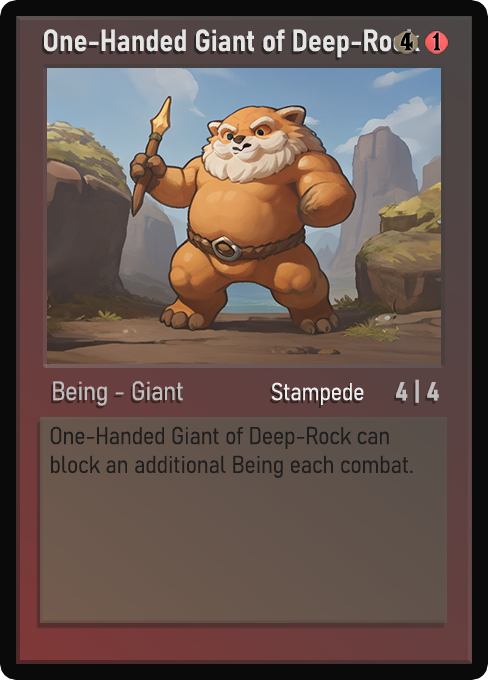
<style>
.page{position:relative;width:488px;height:680px}
.page>*{position:absolute;margin:0}
.t1{font:30px "Bahnschrift-SemiBoldSemiCondensed";color:#f2f2f2;font-weight:bold}
.t2{font:25px "WTRRoycroft";color:#000000;font-weight:bold;scale:1.09 1}
.t3{font:26px "Bahnschrift-LightSemiCondensed";color:#c8c8c8;font-weight:bold}
.t4{font:24px "Bahnschrift-LightSemiCondensed";color:#f0efef;font-weight:bold}
.t5{font:26px "Bahnschrift-BoldSemiCondensed";color:#c1bdbd;font-weight:bold}
.t6{font:24px "Bahnschrift-LightSemiCondensed";color:#1e1e1e;font-weight:bold}
</style>
<div class="page">
<p class="t1" style="left:44px;top:29px;width:376px;height:29px;opacity:0.9">One-Handed Giant of Deep-Rock</p>
<p class="t2" style="left:400px;top:32px;width:13px;height:19px">4</p>
<p class="t2" style="left:432px;top:32px;width:9px;height:19px">1</p>
<p class="t3" style="left:53px;top:381px;width:130px;height:25px;opacity:0.9">Being - Giant</p>
<p class="t4" style="left:271px;top:382px;width:93px;height:23px">Stampede</p>
<p class="t5" style="left:396px;top:379px;width:43px;height:24px">4 | 4</p>
<p class="t6" style="left:50px;top:426px;width:363px;height:52px">One-Handed Giant of Deep-Rock can block an additional Being each combat.</p>
</div>
